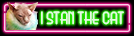
<style>
.page{position:relative;width:134px;height:36px}
.page>*{position:absolute;margin:0}
.t1{font:16.5px "BeautySchoolDropoutII";color:#e4fae0}
</style>
<div class="page">
<p class="t1" style="left:41px;top:11px;width:83px;height:14px">I STAN THE CAT</p>
</div>
